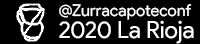
<style>
.page{position:relative;width:200px;height:44px;background:#000000}
.page>*{position:absolute;margin:0}
.t1{font:16.3px/18.1px "ProductSans-Regular";color:#ffffff}
.t2{font:23.7px/22.3px "ProductSans-Regular";color:#ffffff}
</style>
<div class="page">
<p class="t1" style="left:59px;top:4px;width:135px;height:40px">@Zurracapoteconf<br><span class="t2">2020 La Rioja</span></p>
</div>
